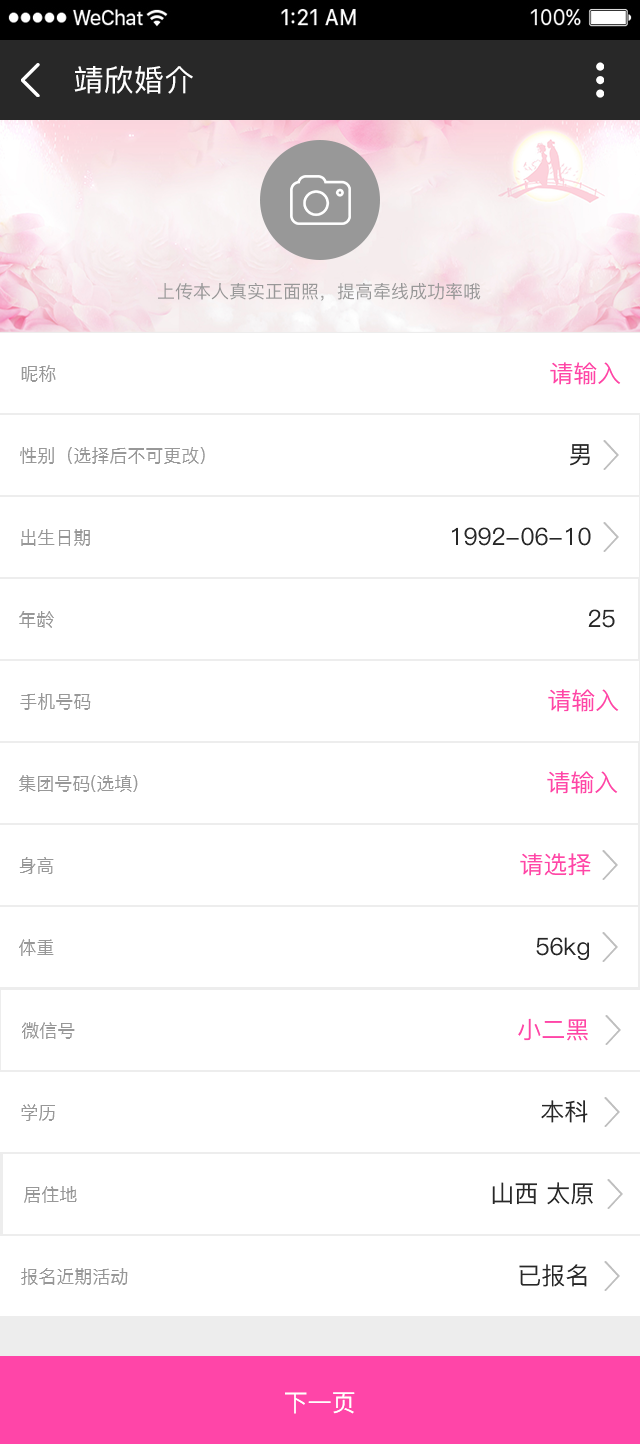
<style>
.page{position:relative;width:640px;height:1444px;background:#ffffff}
.page>*{position:absolute;margin:0}
.t1{font:30px "PingFang-SC-Medium";letter-spacing:0.01em;color:#ffffff;text-transform:uppercase}
.t2{font:18px "PingFang-SC-Medium";color:#989898;text-transform:uppercase}
.t3{font:24px "PingFang-SC-Medium";color:#ff45a8;text-transform:uppercase}
.t4{font:24px "PingFang-SC-Medium";color:#282828;text-transform:uppercase}
.t5{font:24px "PingFang-SC-Medium";color:#282828}
.t6{font:24px "PingFang-SC-Medium";color:#ffffff;text-transform:uppercase}
</style>
<div class="page">
<p class="t1" style="left:74px;top:65px;width:119px;height:29px">靖欣婚介</p>
<p class="t2" style="left:158px;top:283px;width:323px;height:18px">上传本人真实正面照，提高牵线成功率哦</p>
<p class="t2" style="left:21px;top:365px;width:35px;height:17px">昵称</p>
<p class="t3" style="left:550px;top:362px;width:71px;height:23px">请输入</p>
<p class="t2" style="left:20px;top:447px;width:185px;height:17px">性别（选择后不可更改）</p>
<p class="t4" style="left:570px;top:444px;width:20px;height:22px">男</p>
<p class="t2" style="left:21px;top:529px;width:69px;height:17px">出生日期</p>
<p class="t4" style="left:452px;top:527px;width:139px;height:19px">1992-06-10</p>
<p class="t2" style="left:19px;top:611px;width:35px;height:17px">年龄</p>
<p class="t4" style="left:588px;top:609px;width:27px;height:19px">25</p>
<p class="t3" style="left:548px;top:689px;width:71px;height:23px">请输入</p>
<p class="t2" style="left:20px;top:693px;width:71px;height:17px">手机号码</p>
<p class="t3" style="left:547px;top:771px;width:71px;height:23px">请输入</p>
<p class="t2" style="left:19px;top:775px;width:119px;height:17px">集团号码(选填)</p>
<p class="t2" style="left:19px;top:857px;width:35px;height:17px">身高</p>
<p class="t3" style="left:520px;top:853px;width:71px;height:23px">请选择</p>
<p class="t2" style="left:19px;top:939px;width:35px;height:17px">体重</p>
<p class="t4" style="left:536px;top:937px;width:53px;height:23px">56<span class="t5">kg</span></p>
<p class="t2" style="left:22px;top:1022px;width:53px;height:17px">微信号</p>
<p class="t3" style="left:518px;top:1018px;width:70px;height:23px">小二黑</p>
<p class="t2" style="left:21px;top:1104px;width:34px;height:17px">学历</p>
<p class="t4" style="left:541px;top:1100px;width:47px;height:23px">本科</p>
<p class="t4" style="left:492px;top:1182px;width:101px;height:23px">山西 太原</p>
<p class="t2" style="left:24px;top:1186px;width:53px;height:17px">居住地</p>
<p class="t4" style="left:519px;top:1264px;width:68px;height:23px">已报名</p>
<p class="t2" style="left:21px;top:1268px;width:107px;height:17px">报名近期活动</p>
<p class="t6" style="left:285px;top:1392px;width:70px;height:22px">下一页</p>
</div>
